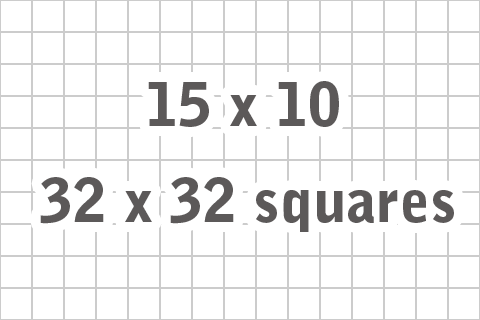
<style>
.page{position:relative;width:480px;height:320px;background:#ffffff}
.page>*{position:absolute;margin:0}
.t1{font:60px "BellGothicStd-Black";color:#5c5959}
</style>
<div class="page">
<p class="t1" style="left:148px;top:81px;width:191px;height:46px">15 x 10</p>
<p class="t1" style="left:40px;top:177px;width:414px;height:55px">32 x 32 squares</p>
</div>
